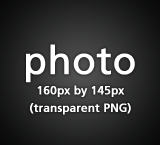
<style>
.page{position:relative;width:160px;height:145px}
.page>*{position:absolute;margin:0}
.t1{font:38.4px "FrutigerLT-Roman";color:#ffffff;font-weight:bold}
.t2{font:11.5px/17.5px "FrutigerLT-Roman";color:#ffffff;font-weight:bold}
.t3{font:11.5px "FrutigerLT-Roman";color:#ffffff;font-weight:bold}
</style>
<div class="page">
<p class="t1" style="left:26px;top:44px;width:109px;height:39px">photo</p>
<p class="t2" style="left:30px;top:85px;width:101px;height:30px;text-align:center"><span class="t3">160px by 145px<br></span>(transparent PNG)</p>
</div>
